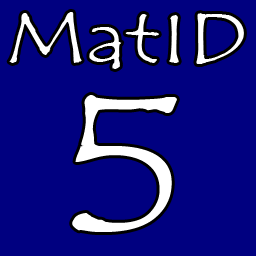
<style>
.page{position:relative;width:256px;height:256px;background:#000080}
.page>*{position:absolute;margin:0}
.t1{font:70.8px/170px "TempusSansITC";color:#ffffff;scale:1.31 1}
.t2{font:200px/170px "TempusSansITC";color:#ffffff;scale:1.31 1}
</style>
<div class="page">
<p class="t1" style="left:9px;top:12px;width:235px;height:220px;text-align:center">MatID<br><span class="t2">5</span></p>
</div>
